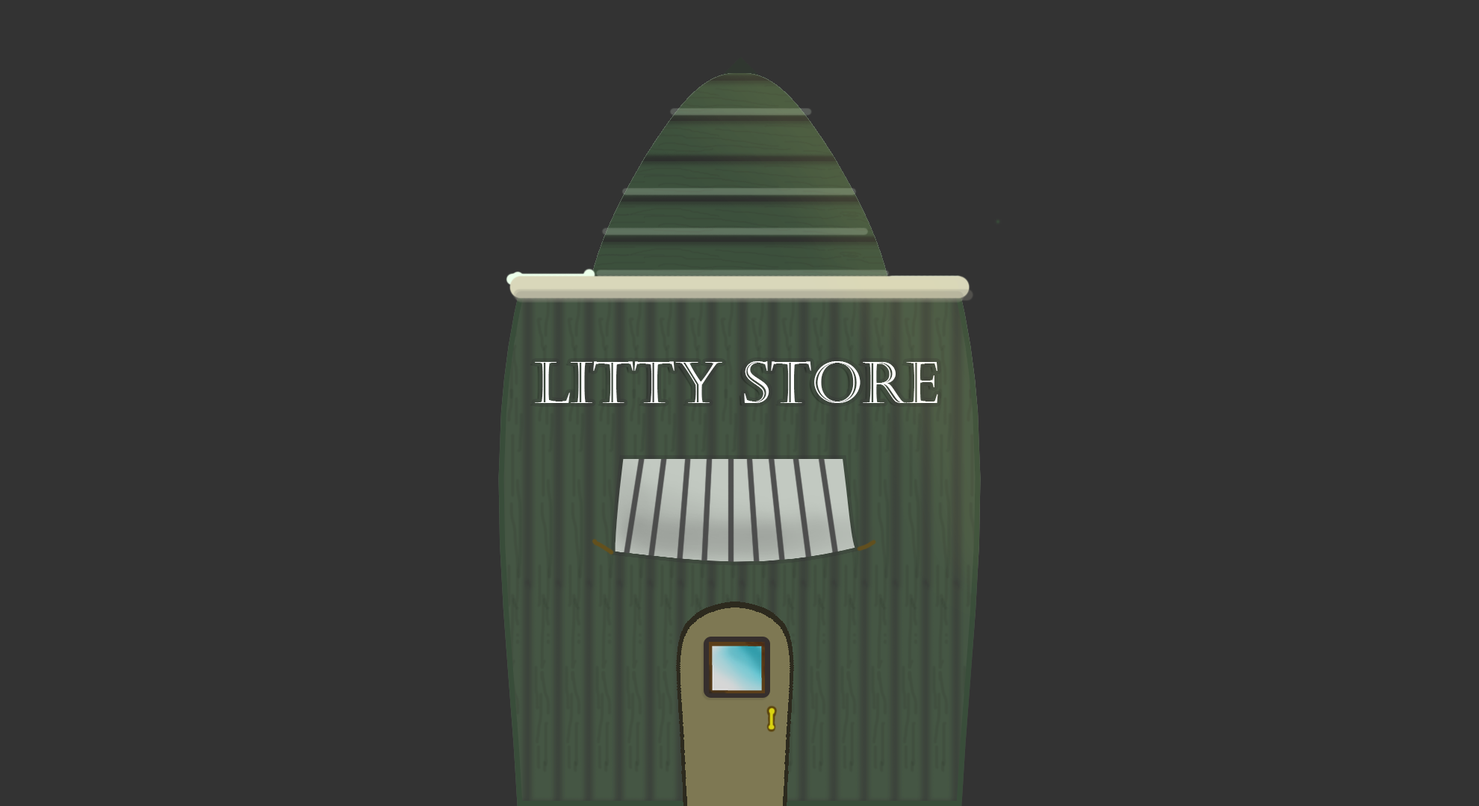
<style>
.page{position:relative;width:1479px;height:806px;background:#333333}
.page>*{position:absolute;margin:0}
.t1{font:57.6px "Castellar";color:#ffffff}
</style>
<div class="page">
<p class="t1" style="left:535px;top:361px;width:403px;height:42px">LITTY STORE</p>
</div>
